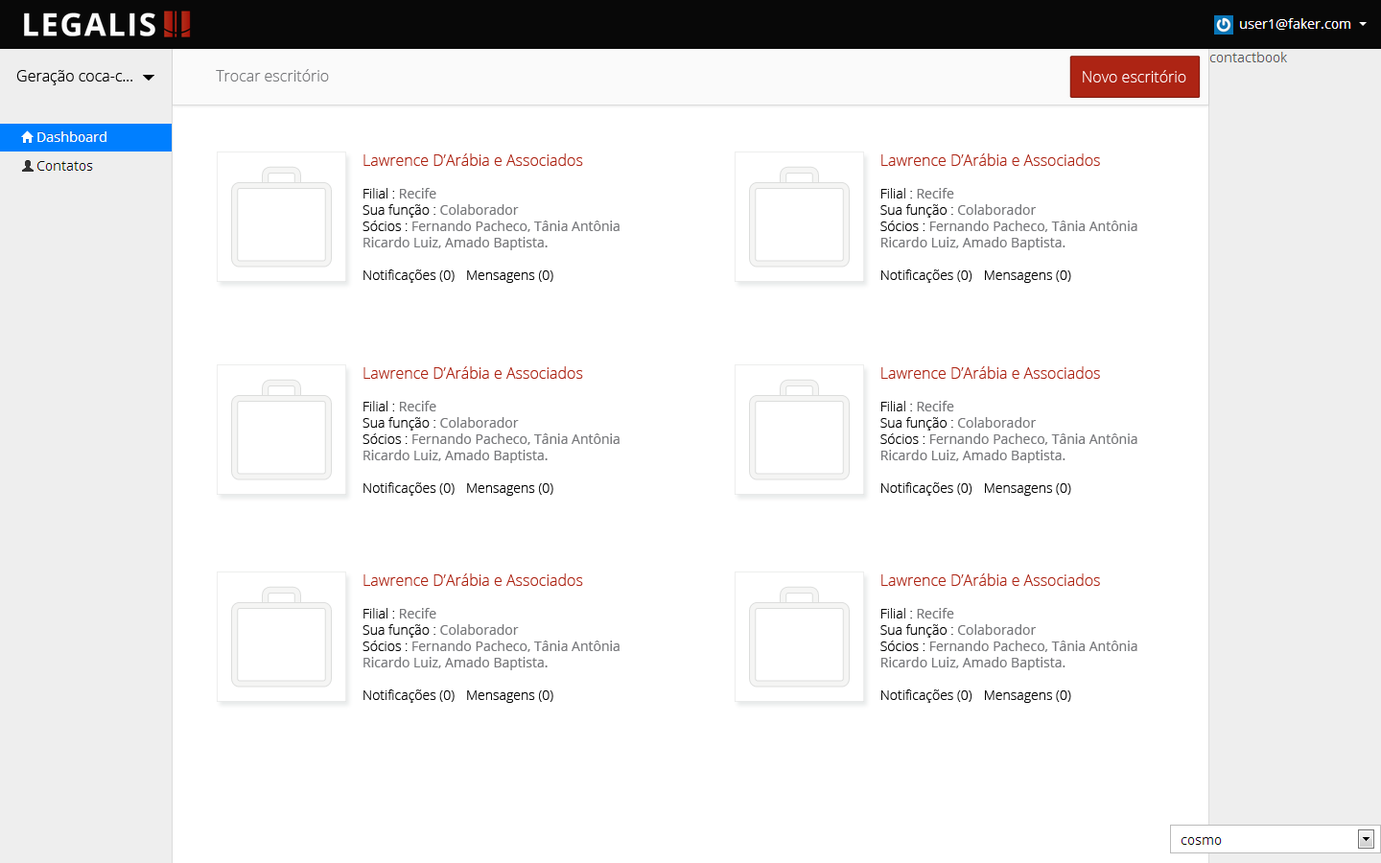
<style>
.page{position:relative;width:1381px;height:863px;background:#ffffff}
.page>*{position:absolute;margin:0}
.t1{font:15.3px "OpenSans-Light";color:#000000}
.t2{font:15.3px "OpenSans-Light";color:#77787b}
.t3{font:15.3px "OpenSans-Light";color:#ffffff}
.t4{font:13.4px/16.3px "OpenSans";color:#77787b}
.t5{font:15.3px/16.3px "OpenSans-Light";color:#ad2414}
.t6{font:13.4px/16.3px "OpenSans-Light";color:#000000}
</style>
<div class="page">
<p class="t1" style="left:16px;top:70px;width:116px;height:15px">Geração coca-c...</p>
<p class="t2" style="left:216px;top:69px;width:113px;height:13px">Trocar escritório</p>
<p class="t3" style="left:1083px;top:70px;width:104px;height:12px">Novo escritório</p>
<p class="t4" style="left:363px;top:153px;width:257px;height:130px"><span class="t5">Lawrence D’Arábia e Associados<br><br></span><span class="t6">Filial :</span> Recife<br><span class="t6">Sua função :</span> Colaborador<br><span class="t6">Sócios :</span> Fernando Pacheco, Tânia Antônia<br>Ricardo Luiz, Amado Baptista.<br><br><span class="t6">Notificações (0)  Mensagens (0)</span></p>
<p class="t4" style="left:881px;top:153px;width:257px;height:130px"><span class="t5">Lawrence D’Arábia e Associados<br><br></span><span class="t6">Filial :</span> Recife<br><span class="t6">Sua função :</span> Colaborador<br><span class="t6">Sócios :</span> Fernando Pacheco, Tânia Antônia<br>Ricardo Luiz, Amado Baptista.<br><br><span class="t6">Notificações (0)  Mensagens (0)</span></p>
<p class="t4" style="left:363px;top:366px;width:257px;height:130px"><span class="t5">Lawrence D’Arábia e Associados<br><br></span><span class="t6">Filial :</span> Recife<br><span class="t6">Sua função :</span> Colaborador<br><span class="t6">Sócios :</span> Fernando Pacheco, Tânia Antônia<br>Ricardo Luiz, Amado Baptista.<br><br><span class="t6">Notificações (0)  Mensagens (0)</span></p>
<p class="t4" style="left:881px;top:366px;width:257px;height:130px"><span class="t5">Lawrence D’Arábia e Associados<br><br></span><span class="t6">Filial :</span> Recife<br><span class="t6">Sua função :</span> Colaborador<br><span class="t6">Sócios :</span> Fernando Pacheco, Tânia Antônia<br>Ricardo Luiz, Amado Baptista.<br><br><span class="t6">Notificações (0)  Mensagens (0)</span></p>
<p class="t4" style="left:363px;top:574px;width:257px;height:129px"><span class="t5">Lawrence D’Arábia e Associados<br><br></span><span class="t6">Filial :</span> Recife<br><span class="t6">Sua função :</span> Colaborador<br><span class="t6">Sócios :</span> Fernando Pacheco, Tânia Antônia<br>Ricardo Luiz, Amado Baptista.<br><br><span class="t6">Notificações (0)  Mensagens (0)</span></p>
<p class="t4" style="left:881px;top:574px;width:257px;height:129px"><span class="t5">Lawrence D’Arábia e Associados<br><br></span><span class="t6">Filial :</span> Recife<br><span class="t6">Sua função :</span> Colaborador<br><span class="t6">Sócios :</span> Fernando Pacheco, Tânia Antônia<br>Ricardo Luiz, Amado Baptista.<br><br><span class="t6">Notificações (0)  Mensagens (0)</span></p>
</div>
